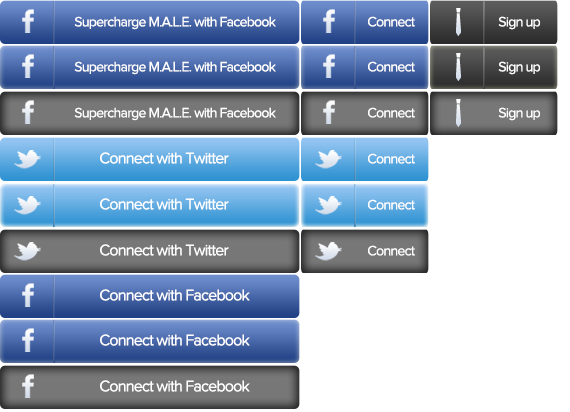
<style>
.page{position:relative;width:570px;height:412px;background:#ffffff}
.page>*{position:absolute;margin:0}
.t1{font:14px "ProximaNova-Regular";letter-spacing:-0.05em;color:#ffffff}
.t2{font:16px "ProximaNova-Regular";letter-spacing:-0.05em;color:#ffffff}
</style>
<div class="page">
<p class="t1" style="left:74px;top:16px;width:202px;height:14px">Supercharge M.A.L.E. with Facebook</p>
<p class="t1" style="left:368px;top:16px;width:47px;height:11px">Connect</p>
<p class="t1" style="left:498px;top:16px;width:43px;height:14px">Sign up</p>
<p class="t1" style="left:74px;top:61px;width:202px;height:14px">Supercharge M.A.L.E. with Facebook</p>
<p class="t1" style="left:368px;top:61px;width:47px;height:11px">Connect</p>
<p class="t1" style="left:498px;top:61px;width:43px;height:14px">Sign up</p>
<p class="t1" style="left:74px;top:107px;width:202px;height:14px">Supercharge M.A.L.E. with Facebook</p>
<p class="t1" style="left:368px;top:107px;width:47px;height:11px">Connect</p>
<p class="t1" style="left:498px;top:107px;width:43px;height:14px">Sign up</p>
<p class="t2" style="left:100px;top:152px;width:129px;height:12px">Connect with Twitter</p>
<p class="t1" style="left:368px;top:153px;width:47px;height:11px">Connect</p>
<p class="t2" style="left:100px;top:198px;width:129px;height:12px">Connect with Twitter</p>
<p class="t1" style="left:368px;top:199px;width:47px;height:11px">Connect</p>
<p class="t2" style="left:100px;top:244px;width:129px;height:12px">Connect with Twitter</p>
<p class="t1" style="left:368px;top:245px;width:47px;height:11px">Connect</p>
<p class="t2" style="left:100px;top:289px;width:150px;height:12px">Connect with Facebook</p>
<p class="t2" style="left:100px;top:334px;width:150px;height:12px">Connect with Facebook</p>
<p class="t2" style="left:100px;top:380px;width:150px;height:12px">Connect with Facebook</p>
</div>
